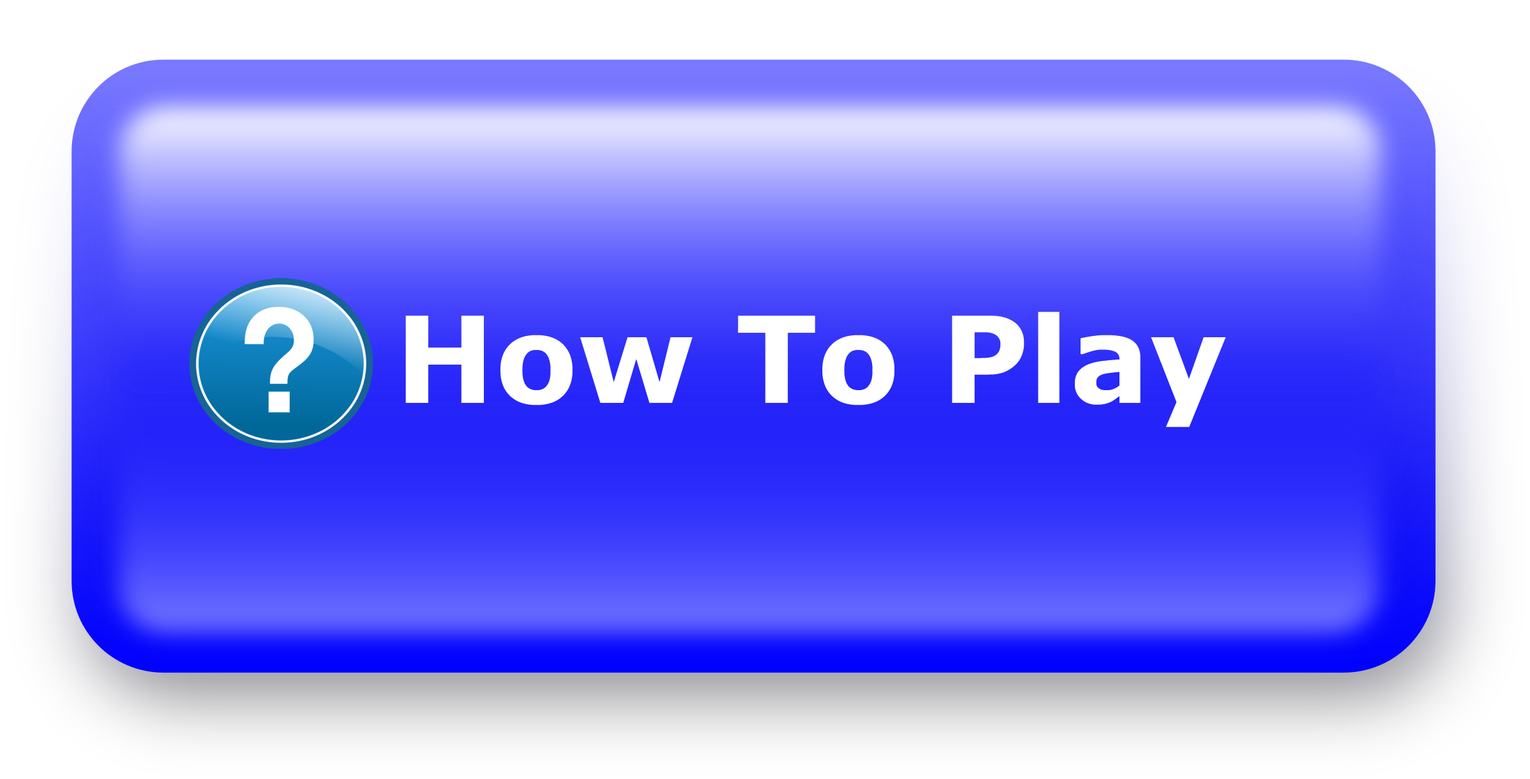
<style>
.page{position:relative;width:1530px;height:779px}
.page>*{position:absolute;margin:0}
.t1{font:119.9px "Verdana-Bold";color:#ffffff}
.t2{font:119.9px "Verdana-Bold";color:#000000}
</style>
<div class="page">
<p class="t1" style="left:166px;top:311px;width:1168px;height:278px;text-align:center"><span class="t2">   </span>How To Play</p>
</div>
